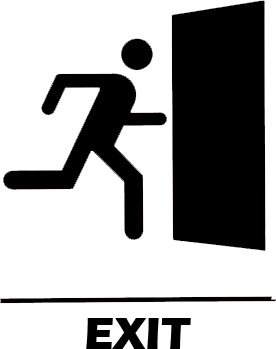
<style>
.page{position:relative;width:276px;height:349px;background:#ffffff}
.page>*{position:absolute;margin:0}
.t1{font:45.8px "ErasITC-Bold";color:#000000}
</style>
<div class="page">
<p class="t1" style="left:86px;top:318px;width:105px;height:31px">EXIT</p>
</div>
